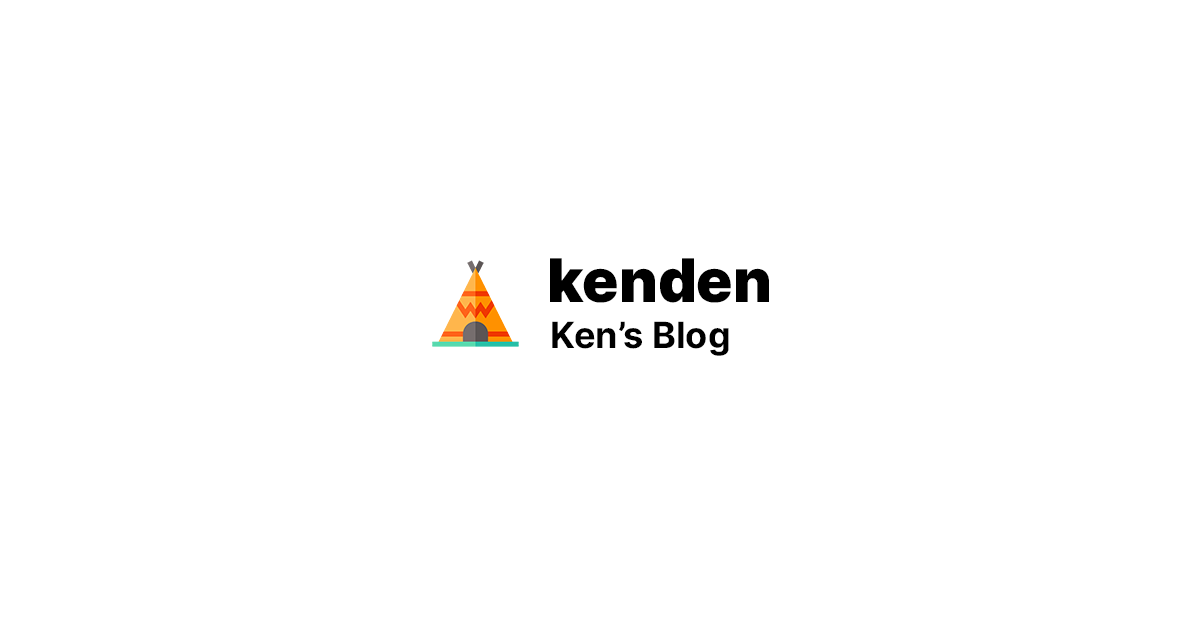
<style>
.page{position:relative;width:1200px;height:627px;background:#ffffff}
.page>*{position:absolute;margin:0}
.t1{font:60px "Inter-Black";color:#000000}
.t2{font:36px "Inter-Bold";color:#000000}
</style>
<div class="page">
<p class="t1" style="left:550px;top:258px;width:219px;height:45px">kenden</p>
<p class="t2" style="left:552px;top:321px;width:177px;height:35px">Ken’s Blog</p>
</div>
